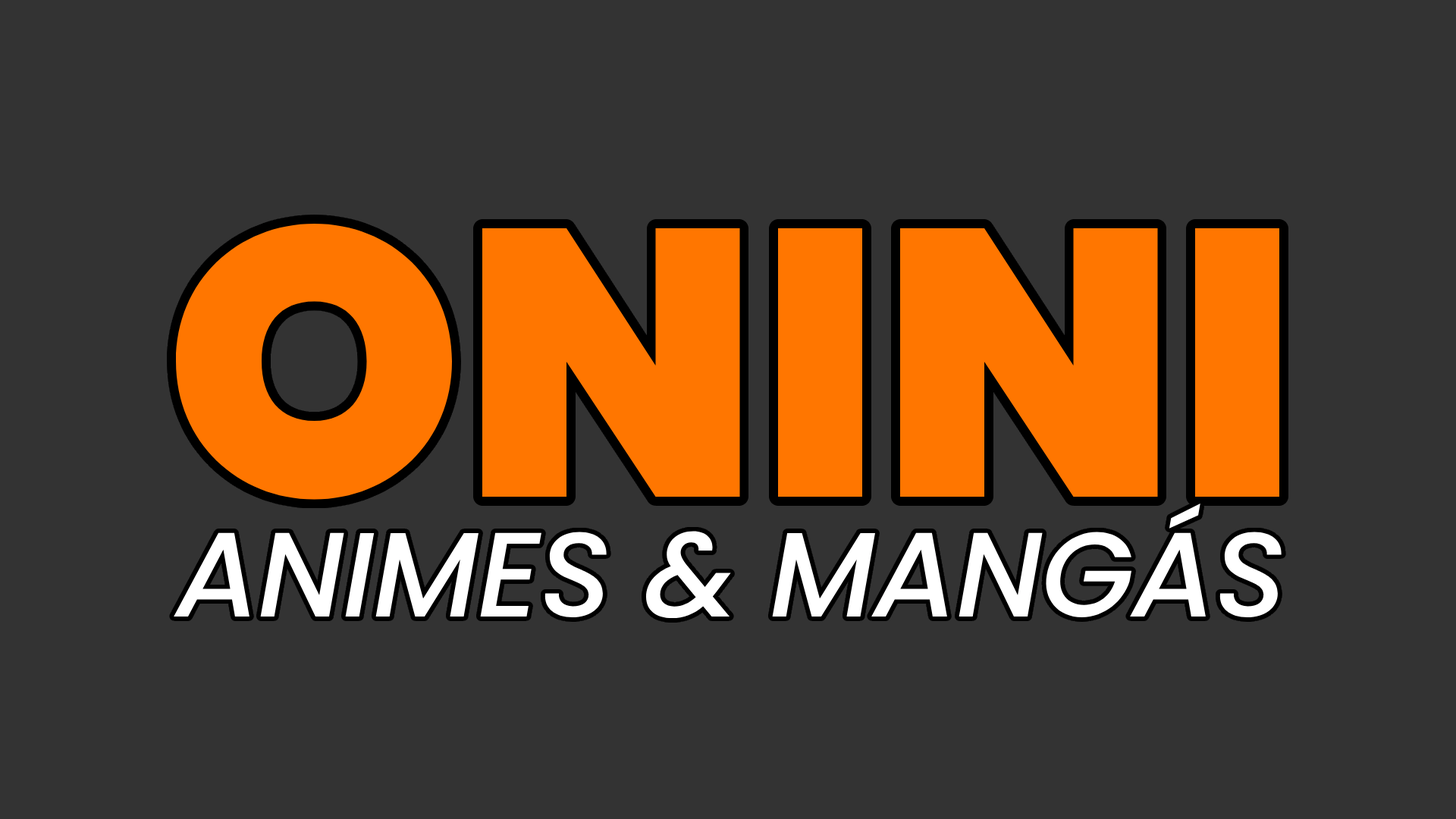
<style>
.page{position:relative;width:1456px;height:819px;background:#333333}
.page>*{position:absolute;margin:0}
.t1{font:379.2px "Poppins-Black";color:#ff7600}
.t2{font:120px "Poppins-MediumItalic";letter-spacing:-0.013em;color:#ffffff}
</style>
<div class="page">
<p class="t1" style="left:176px;top:224px;width:1103px;height:276px">ONINI</p>
<p class="t2" style="left:174px;top:504px;width:1108px;height:114px">ANIMES &amp; MANGÁS</p>
</div>
